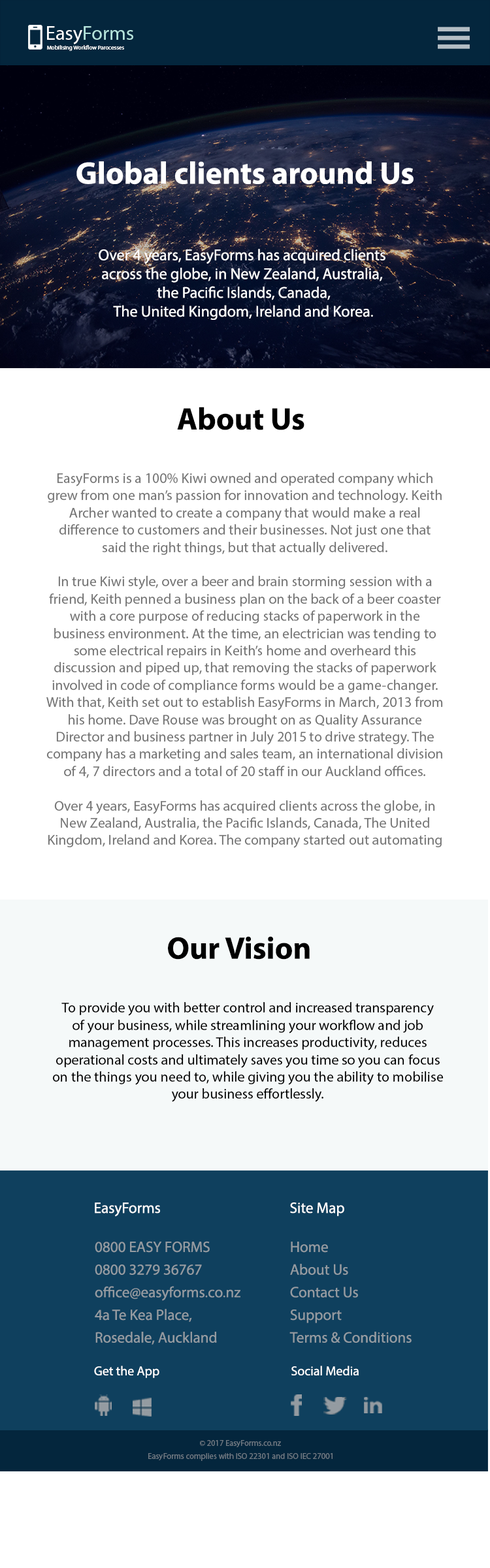
<style>
.page{position:relative;width:490px;height:1568px;background:#ffffff}
.page>*{position:absolute;margin:0}
.t1{font:20px "MyriadPro-Regular";color:#b4e3dc}
.t2{font:20px "MyriadPro-Regular";color:#ffffff}
.t3{font:5.8px "MyriadPro-Regular";color:#fcfdfd}
.t4{font:31.3px "MyriadPro-Bold";color:#ffffff}
.t5{font:15.7px "MyriadPro-Regular";color:#ffffff}
.t6{font:31.3px "MyriadPro-Bold";color:#000000}
.t7{font:14.4px "MyriadPro-Regular";color:#747474}
.t8{font:14.4px "MyriadPro-Regular";color:#000000}
.t9{font:15.1px "MyriadPro-Regular";color:#ffffff}
.t10{font:15.1px/11.3px "MyriadPro-Regular";color:#949ba1}
.t11{font:12.9px "MyriadPro-Regular";color:#ffffff}
.t12{font:8.2px "MyriadPro-Regular";color:#717b84}
</style>
<div class="page">
<p class="t1" style="left:47px;top:26px;width:86px;height:18px"><span class="t2">Easy</span>Forms</p>
<p class="t3" style="left:47px;top:45px;width:77px;height:6px">Mobilising Workflow Parocesses</p>
<p class="t4" style="left:76px;top:161px;width:337px;height:23px">Global clients around Us</p>
<p class="t5" style="left:99px;top:249px;width:286px;height:71px;text-align:center">Over 4 years, EasyForms has acquired clients <br>across the globe, in New Zealand, Australia, <br>the Pacific Islands, Canada,<br> The United Kingdom, Ireland and Korea.</p>
<p class="t6" style="left:177px;top:407px;width:127px;height:23px">About Us</p>
<p class="t7" style="left:46px;top:473px;width:397px;height:375px;text-align:center">EasyForms is a 100% Kiwi owned and operated company which grew from one man’s passion for innovation and technology. Keith Archer wanted to create a company that would make a real difference to customers and their businesses. Not just one that said the right things, but that actually delivered.<br><br>In true Kiwi style, over a beer and brain storming session with a friend, Keith penned a business plan on the back of a beer coaster with a core purpose of reducing stacks of paperwork in the business environment. At the time, an electrician was tending to some electrical repairs in Keith’s home and overheard this discussion and piped up, that removing the stacks of paperwork involved in code of compliance forms would be a game-changer. With that, Keith set out to establish EasyForms in March, 2013 from his home. Dave Rouse was brought on as Quality Assurance Director and business partner in July 2015 to drive strategy. The company has a marketing and sales team, an international division of 4, 7 directors and a total of 20 staff in our Auckland offices.<br><br>Over 4 years, EasyForms has acquired clients across the globe, in New Zealand, Australia, the Pacific Islands, Canada, The United Kingdom, Ireland and Korea. The company started out automating paper forms into app-based solutions and has now evolved to provide a complete solution for workflow management and develops bespoke web portal and app-based solutions.</p>
<p class="t6" style="left:168px;top:936px;width:141px;height:24px">Our Vision</p>
<p class="t8" style="left:52px;top:1002px;width:391px;height:100px;text-align:center">To provide you with better control and increased transparency <br>of your business, while streamlining your workflow and job management processes. This increases productivity, reduces operational costs and ultimately saves you time so you can focus on the things you need to, while giving you the ability to mobilise your business effortlessly.</p>
<p class="t9" style="left:95px;top:1202px;width:65px;height:15px">EasyForms</p>
<p class="t9" style="left:290px;top:1202px;width:54px;height:14px">Site Map</p>
<p class="t10" style="left:95px;top:1241px;width:145px;height:104px">0800 EASY FORMS<br><br>0800 3279 36767<br><br>office@easyforms.co.nz<br><br>4a Te Kea Place,<br><br>Rosedale, Auckland</p>
<p class="t10" style="left:289px;top:1242px;width:122px;height:101px">Home<br><br>About Us<br><br>Contact Us<br><br>Support<br><br>Terms &amp; Conditions</p>
<p class="t11" style="left:94px;top:1366px;width:65px;height:12px">Get the App</p>
<p class="t11" style="left:291px;top:1366px;width:67px;height:9px">Social Media</p>
<p class="t12" style="left:200px;top:1440px;width:81px;height:7px">© 2017 EasyForms.co.nz</p>
<p class="t12" style="left:148px;top:1453px;width:184px;height:8px">EasyForms complies with ISO 22301 and ISO IEC 27001</p>
</div>
